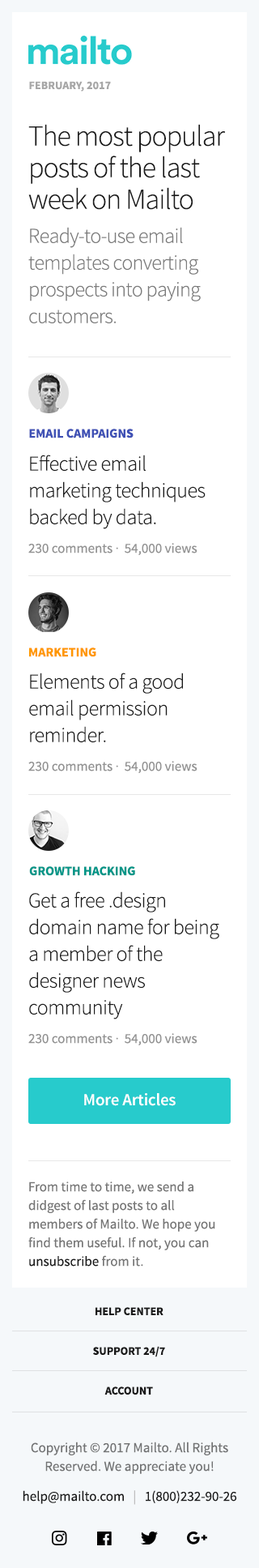
<style>
.page{position:relative;width:259px;height:1568px;background:#ffffff}
.page>*{position:absolute;margin:0}
.t1{font:11.3px "SourceSansPro-Bold";letter-spacing:0.009em;color:#a7a7a7}
.t2{font:29.2px/31.6px "SourceSansPro-Light";letter-spacing:-0.03em;color:#1a1a1a}
.t3{font:21.1px/26.7px "SourceSansPro-Light";letter-spacing:-0.027em;color:#7b7b7b}
.t4{font:13px "SourceSansPro-Bold";color:#3f51b5}
.t5{font:21.1px/26.7px "SourceSansPro-Light";letter-spacing:-0.019em;color:#1a1a1a}
.t6{font:13.8px "SourceSansPro-Regular";color:#939393}
.t7{font:13px "SourceSansPro-Bold";color:#ff9800}
.t8{font:13px "SourceSansPro-Bold";color:#009688}
.t9{font:17px "SourceSansPro-Semibold";letter-spacing:-0.01em;color:#ffffff}
.t10{font:13.8px/18.6px "SourceSansPro-Regular";color:#767676}
.t11{font:13.8px/18.6px "SourceSansPro-Regular";color:#1a1a1a}
.t12{font:11.3px/39.7px "SourceSansPro-Bold";color:#1a1a1a}
.t13{font:13.8px/18.6px "SourceSansPro-Regular";color:#727374}
.t14{font:13.8px/18.6px "SourceSansPro-Regular";color:#bebebe}
</style>
<div class="page">
<p class="t1" style="left:29px;top:81px;width:82px;height:11px">FEBRUARY, 2017</p>
<p class="t2" style="left:28px;top:124px;width:197px;height:86px">The most popular posts of the last week on Mailto</p>
<p class="t3" style="left:28px;top:227px;width:173px;height:96px">Ready-to-use email <br>templates converting prospects into paying customers.</p>
<p class="t4" style="left:29px;top:429px;width:105px;height:9px">EMAIL CAMPAIGNS</p>
<p class="t5" style="left:30px;top:455px;width:176px;height:74px">Effective email <br>marketing techniques backed by data.</p>
<p class="t6" style="left:28px;top:543px;width:170px;height:12px">230 comments ·  54,000 views</p>
<p class="t7" style="left:29px;top:647px;width:67px;height:10px">MARKETING</p>
<p class="t5" style="left:29px;top:673px;width:154px;height:70px">Elements of a good email permission <br>reminder.</p>
<p class="t6" style="left:28px;top:761px;width:170px;height:12px">230 comments ·  54,000 views</p>
<p class="t8" style="left:29px;top:866px;width:106px;height:10px">GROWTH HACKING</p>
<p class="t5" style="left:29px;top:891px;width:191px;height:128px">Get a free .design <br>domain name for being <br>a member of the <br>designer news <br>community</p>
<p class="t6" style="left:28px;top:1033px;width:170px;height:12px">230 comments ·  54,000 views</p>
<p class="t9" style="left:84px;top:1093px;width:92px;height:13px">More Articles</p>
<p class="t10" style="left:28px;top:1181px;width:188px;height:86px">From time to time, we send a <br>didgest of last posts to all <br>members of Mailto. We hope you <br>find them useful. If not, you can <br><span class="t11">unsubscribe </span>from it.</p>
<p class="t12" style="left:93px;top:1307px;width:72px;height:88px;text-align:center">HELP CENTER<br>SUPPORT 24/7<br>ACCOUNT</p>
<p class="t13" style="left:23px;top:1442px;width:214px;height:63px;text-align:center">Copyright © 2017 Mailto. All Rights Reserved. We appreciate you!<br><span class="t11">help@mailto.com   </span><span class="t14">|   </span><span class="t11">1(800)232-90-26</span></p>
</div>
